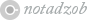
<style>
.page{position:relative;width:88px;height:20px;background:#ffffff}
.page>*{position:absolute;margin:0}
.t1{font:17.5px "ACaslonPro-Italic";color:#a7acad;scale:1.05 1}
</style>
<div class="page">
<p class="t1" style="left:24px;top:2px;width:63px;height:13px">notadzob</p>
</div>
